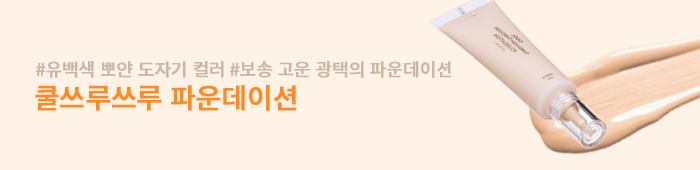
<style>
.page{position:relative;width:700px;height:170px;background:#fff2e6}
.page>*{position:absolute;margin:0}
.t1{font:18px "NotoSansKR-Medium";letter-spacing:-0.03em;color:#cab8a6;font-weight:bold}
.t2{font:28px "NotoSansKR-Medium";letter-spacing:-0.03em;color:#ff8a1e;font-weight:bold}
</style>
<div class="page">
<p class="t1" style="left:35px;top:61px;width:416px;height:17px">#유백색 뽀얀 도자기 컬러 #보송 고운 광택의 파운데이션</p>
<p class="t2" style="left:35px;top:85px;width:262px;height:26px">쿨쓰루쓰루 파운데이션</p>
</div>
